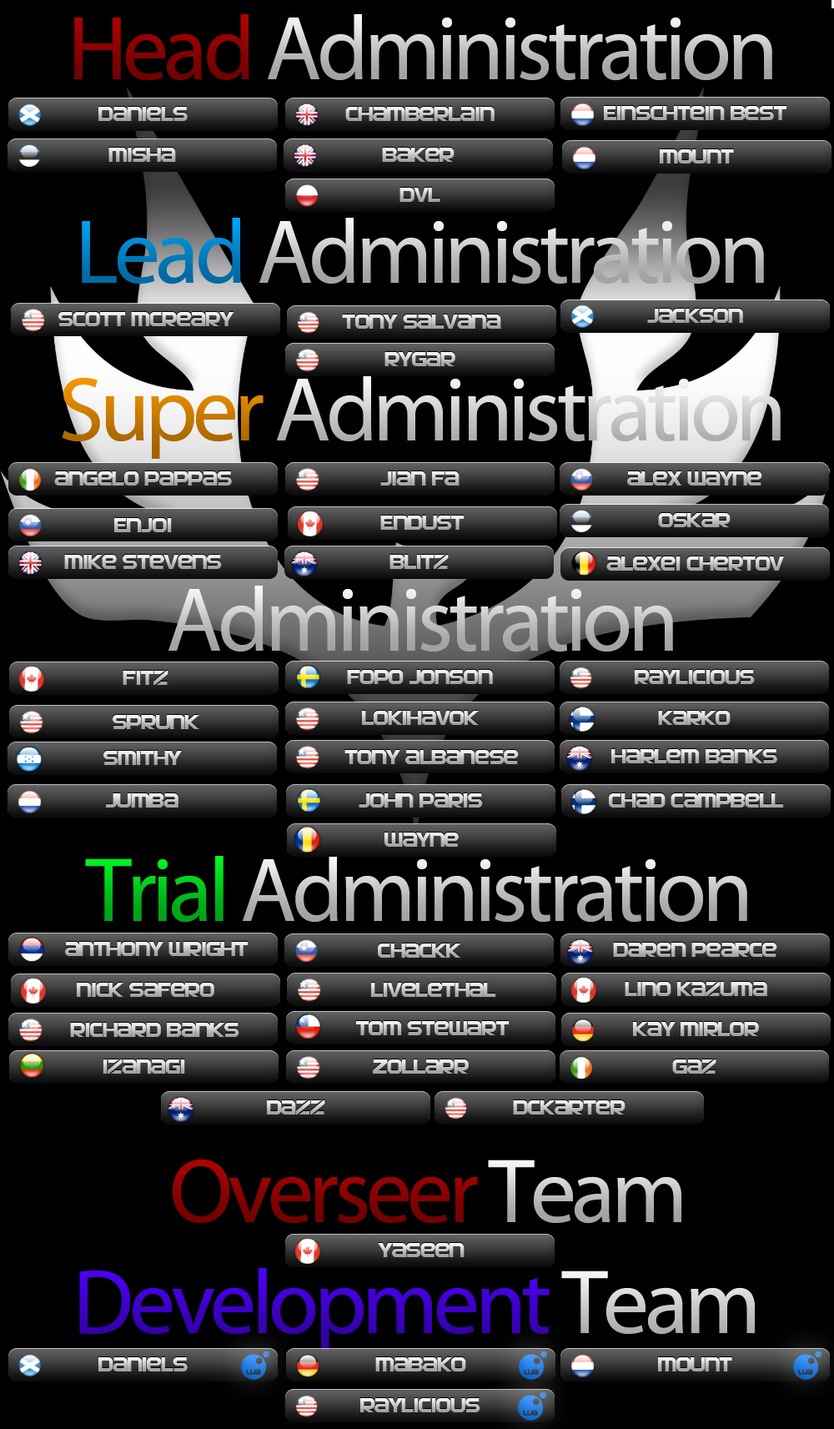
<style>
.page{position:relative;width:834px;height:1429px;background:#000000}
.page>*{position:absolute;margin:0}
.t1{font:91.8px "MyriadPro-Regular";letter-spacing:-0.05em}
.t2{font:21.7px "SFAutomaton"}
</style>
<div class="page">
<p class="t1" style="left:74px;top:14px;width:699px;height:67px">Head Administration</p>
<p class="t2" style="left:98px;top:107px;width:90px;height:14px">Daniels</p>
<p class="t2" style="left:345px;top:107px;width:150px;height:14px">Chamberlain</p>
<p class="t2" style="left:604px;top:106px;width:184px;height:14px">Einschtein Best</p>
<p class="t2" style="left:108px;top:148px;width:68px;height:14px">Misha</p>
<p class="t2" style="left:382px;top:148px;width:73px;height:14px">Baker</p>
<p class="t2" style="left:660px;top:149px;width:74px;height:15px">Mount</p>
<p class="t2" style="left:400px;top:188px;width:41px;height:14px">dvl</p>
<p class="t1" style="left:82px;top:218px;width:682px;height:67px">Lead Administration</p>
<p class="t2" style="left:58px;top:312px;width:176px;height:14px">Scott McReary</p>
<p class="t2" style="left:342px;top:315px;width:159px;height:14px">Tony Salvana</p>
<p class="t2" style="left:647px;top:309px;width:96px;height:14px">Jackson</p>
<p class="t2" style="left:385px;top:352px;width:71px;height:14px">Rygar</p>
<p class="t1" style="left:62px;top:375px;width:719px;height:84px">Super Administration</p>
<p class="t2" style="left:54px;top:471px;width:178px;height:15px">Angelo Pappas</p>
<p class="t2" style="left:380px;top:471px;width:80px;height:15px">Jian Fa</p>
<p class="t2" style="left:627px;top:471px;width:136px;height:15px">Alex Wayne</p>
<p class="t2" style="left:114px;top:518px;width:58px;height:14px">Enjoi</p>
<p class="t2" style="left:380px;top:516px;width:85px;height:14px">Endust</p>
<p class="t2" style="left:658px;top:513px;width:73px;height:14px">Oskar</p>
<p class="t2" style="left:64px;top:555px;width:158px;height:14px">Mike Stevens</p>
<p class="t2" style="left:390px;top:555px;width:59px;height:14px">Blitz</p>
<p class="t2" style="left:607px;top:556px;width:177px;height:15px">Alexei Chertov</p>
<p class="t1" style="left:169px;top:586px;width:504px;height:66px">Administration</p>
<p class="t2" style="left:123px;top:671px;width:46px;height:14px">Fitz</p>
<p class="t2" style="left:347px;top:670px;width:146px;height:14px">Fopo Jonson</p>
<p class="t2" style="left:635px;top:670px;width:120px;height:14px">Raylicious</p>
<p class="t2" style="left:362px;top:711px;width:117px;height:14px">LokiHavok</p>
<p class="t2" style="left:658px;top:711px;width:73px;height:14px">Karko</p>
<p class="t2" style="left:113px;top:715px;width:86px;height:14px">Sprunk</p>
<p class="t2" style="left:612px;top:749px;width:166px;height:14px">Harlem Banks</p>
<p class="t2" style="left:103px;top:751px;width:79px;height:14px">Smithy</p>
<p class="t2" style="left:345px;top:750px;width:174px;height:14px">Tony Albanese</p>
<p class="t2" style="left:106px;top:793px;width:73px;height:15px">Jumba</p>
<p class="t2" style="left:359px;top:793px;width:124px;height:15px">John Paris</p>
<p class="t2" style="left:609px;top:793px;width:175px;height:15px">Chad Campbell</p>
<p class="t2" style="left:385px;top:833px;width:74px;height:14px">Wayne</p>
<p class="t1" style="left:85px;top:856px;width:663px;height:67px">Trial Administration</p>
<p class="t2" style="left:65px;top:942px;width:184px;height:14px">Anthony wright</p>
<p class="t2" style="left:378px;top:944px;width:83px;height:14px">Chackk</p>
<p class="t2" style="left:613px;top:943px;width:165px;height:14px">Daren Pearce</p>
<p class="t2" style="left:77px;top:983px;width:137px;height:14px">Nick Safero</p>
<p class="t2" style="left:371px;top:983px;width:125px;height:14px">Livelethal</p>
<p class="t2" style="left:625px;top:982px;width:143px;height:14px">Lino Kazuma</p>
<p class="t2" style="left:70px;top:1023px;width:169px;height:14px">Richard Banks</p>
<p class="t2" style="left:356px;top:1021px;width:154px;height:14px">Tom Stewart</p>
<p class="t2" style="left:633px;top:1022px;width:126px;height:14px">Kay Mirlor</p>
<p class="t2" style="left:103px;top:1060px;width:82px;height:14px">Izanagi</p>
<p class="t2" style="left:373px;top:1060px;width:96px;height:14px">Zollarr</p>
<p class="t2" style="left:672px;top:1060px;width:45px;height:14px">Gaz</p>
<p class="t2" style="left:267px;top:1100px;width:58px;height:15px">Dazz</p>
<p class="t2" style="left:513px;top:1100px;width:113px;height:15px">dckarter</p>
<p class="t1" style="left:173px;top:1160px;width:509px;height:64px">Overseer Team</p>
<p class="t2" style="left:378px;top:1243px;width:87px;height:14px">Yaseen</p>
<p class="t1" style="left:79px;top:1268px;width:676px;height:84px">Development Team</p>
<p class="t2" style="left:98px;top:1357px;width:90px;height:15px">Daniels</p>
<p class="t2" style="left:375px;top:1357px;width:91px;height:15px">Mabako</p>
<p class="t2" style="left:658px;top:1357px;width:75px;height:15px">Mount</p>
<p class="t2" style="left:360px;top:1398px;width:121px;height:15px">Raylicious</p>
</div>
